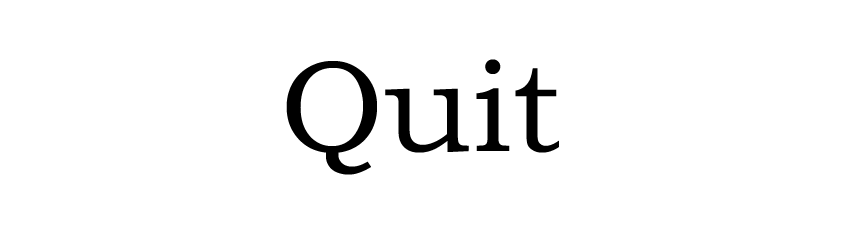
<style>
.page{position:relative;width:847px;height:231px;background:#ffffff}
.page>*{position:absolute;margin:0}
.t1{font:130px "BookmanOldStyle";color:#000000}
</style>
<div class="page">
<p class="t1" style="left:286px;top:59px;width:273px;height:116px">Quit</p>
</div>
